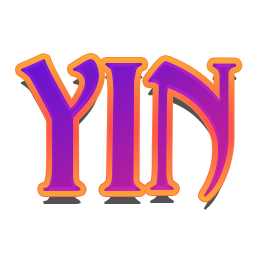
<style>
.page{position:relative;width:256px;height:256px;background:#ffffff}
.page>*{position:absolute;margin:0}
.t1{font:162.5px "Abaddon";letter-spacing:-0.01em;text-transform:uppercase;font-weight:bold}
</style>
<div class="page">
<p class="t1" style="left:21px;top:59px;width:216px;height:138px">Yin</p>
</div>
